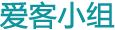
<style>
.page{position:relative;width:115px;height:30px;background:#ffffff}
.page>*{position:absolute;margin:0}
.t1{font:28px "MicrosoftYaHei";color:#0e959d;font-weight:bold}
</style>
<div class="page">
<p class="t1" style="left:0px;top:1px;width:115px;height:28px">爱客小组</p>
</div>
